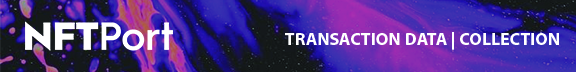
<style>
.page{position:relative;width:576px;height:72px}
.page>*{position:absolute;margin:0}
.t1{font:17.8px "MyriadPro-Bold";color:#ffffff}
</style>
<div class="page">
<p class="t1" style="left:285px;top:32px;width:274px;height:18px">TRANSACTION DATA | COLLECTION</p>
</div>
